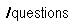
<style>
.page{position:relative;width:77px;height:25px;background:#ffffff}
.page>*{position:absolute;margin:0}
.t1{font:16px "ArialNarrow";color:#000000}
.t2{font:16px "ArialNarrow";color:#000000;font-weight:bold}
</style>
<div class="page">
<p class="t1" style="left:6px;top:7px;width:62px;height:14px"><span class="t2">/</span>questions</p>
</div>
